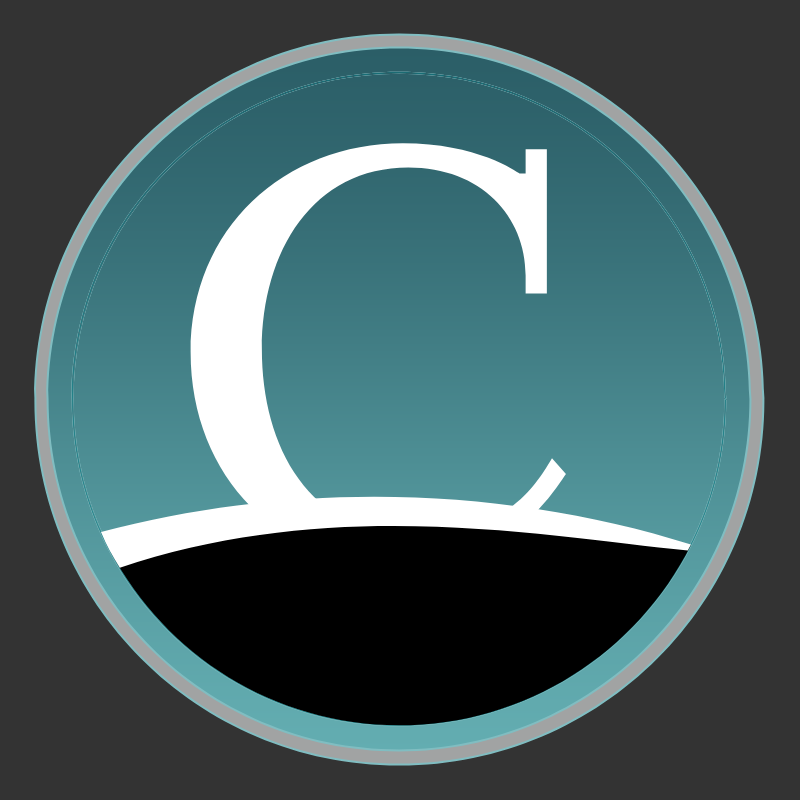
<style>
.page{position:relative;width:800px;height:800px;background:#333333}
.page>*{position:absolute;margin:0}
.t1{font:621.2px "HappyTimesattheIKOB-Regular";color:#ffffff}
</style>
<div class="page">
<p class="t1" style="left:190px;top:143px;width:376px;height:423px">C</p>
</div>
